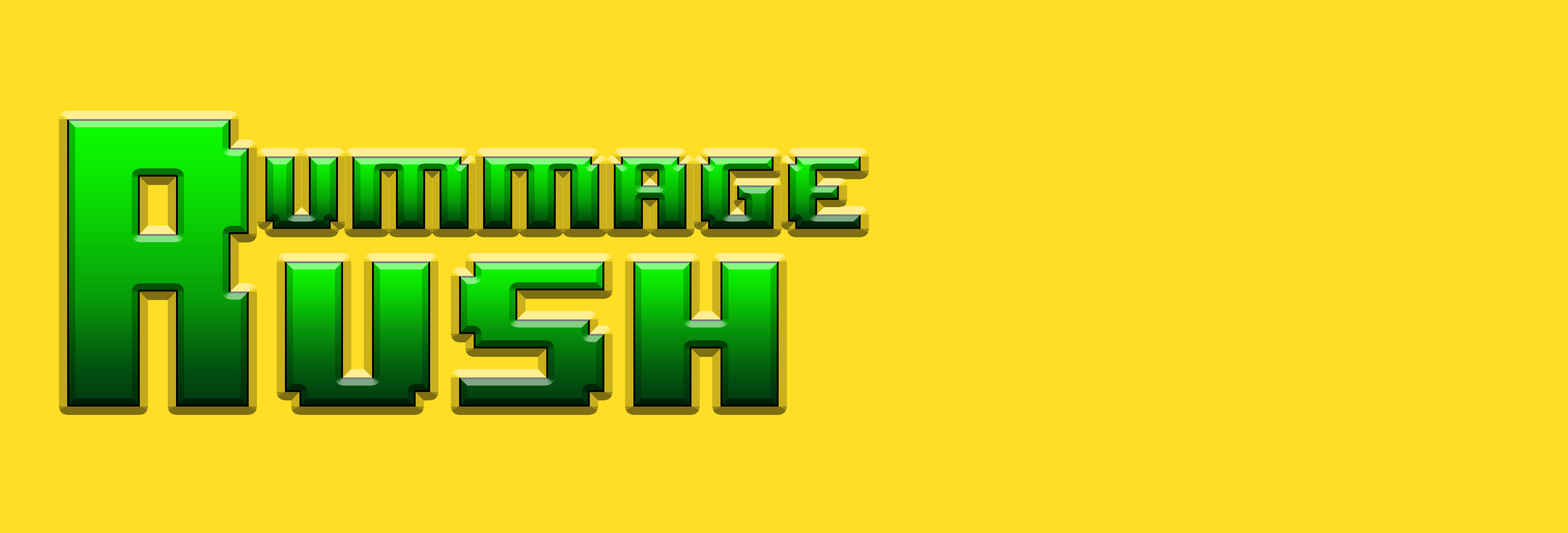
<style>
.page{position:relative;width:1568px;height:533px;background:#ffde25}
.page>*{position:absolute;margin:0}
.t1{font:87.1px "8BITWONDERNominal"}
.t2{font:174.2px "8BITWONDERNominal"}
</style>
<div class="page">
<p class="t1" style="left:265px;top:156px;width:596px;height:73px">UMMAGE</p>
<p class="t2" style="left:285px;top:261px;width:494px;height:146px">USH</p>
</div>
